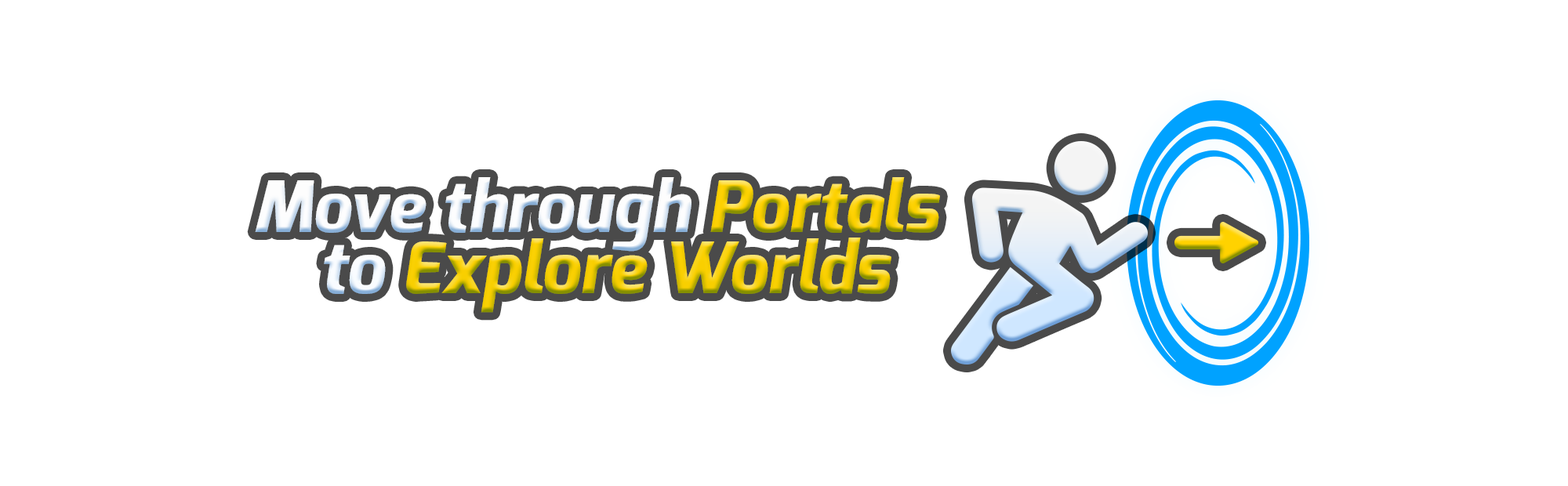
<style>
.page{position:relative;width:1568px;height:486px;background:#ffffff}
.page>*{position:absolute;margin:0}
.t1{font:70.2px/61px "Exo-ExtraBoldItalic"}
</style>
<div class="page">
<p class="t1" style="left:255px;top:177px;width:685px;height:136px;text-align:center">Move through Portals <br>to Explore Worlds</p>
</div>
